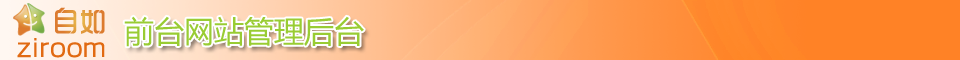
<style>
.page{position:relative;width:960px;height:60px}
.page>*{position:absolute;margin:0}
.t1{font:30px "MicrosoftYaHei";color:#99cc33}
</style>
<div class="page">
<p class="t1" style="left:124px;top:16px;width:240px;height:31px">前台网站管理后台</p>
</div>
